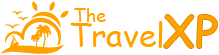
<style>
.page{position:relative;width:219px;height:55px;background:#ffffff}
.page>*{position:absolute;margin:0}
.t1{font:18.3px "ComicSansMS";color:#ffa200}
.t2{font:44.6px "ComicSansMS-Bold";color:#ffa200}
.t3{font:32.3px "ComicSansMS";color:#ffa200}
</style>
<div class="page">
<p class="t1" style="left:74px;top:8px;width:32px;height:14px">The</p>
<p class="t2" style="left:163px;top:14px;width:55px;height:35px">XP</p>
<p class="t3" style="left:70px;top:21px;width:93px;height:27px">Travel</p>
</div>
